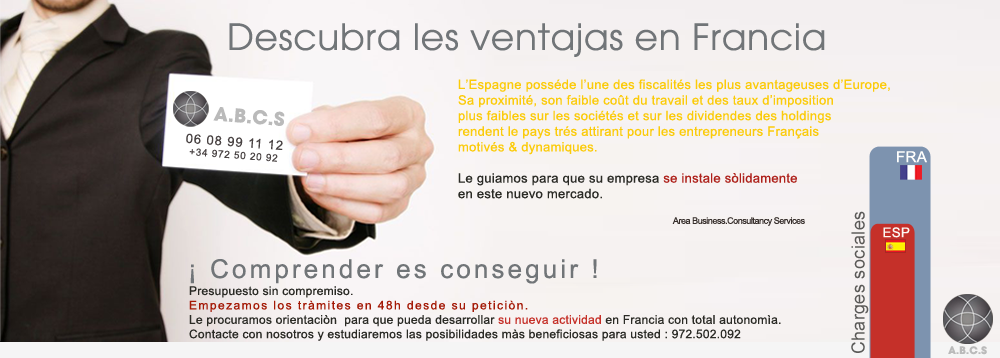
<style>
.page{position:relative;width:1000px;height:358px}
.page>*{position:absolute;margin:0}
.t1{font:36px "AvantGarde-Book";letter-spacing:0.02em;color:#717578}
.t2{font:13px "ArialMT";letter-spacing:0.02em;color:#fbcb0a}
.t3{font:13px "ArialMT";letter-spacing:0.02em;color:#2b2b26}
.t4{font:13px "ArialMT";letter-spacing:0.02em;color:#ae211b}
.t5{font:18.6px "AvantGardeLT-Bold";letter-spacing:0.01em;color:#bababa}
.t6{font:10px "ArialMT";letter-spacing:0.07em;color:#494343}
.t7{font:13px "ArialMT";letter-spacing:0.07em;color:#494343}
.t8{font:15.1px "ArialMT";letter-spacing:0.02em;color:#fefefc}
.t9{font:9px "ArialMT";letter-spacing:-0.05em;color:#362e2b}
.t10{font:10px "ArialMT";letter-spacing:0.025em;color:#362e2b}
.t11{font:18px "ArialMT";letter-spacing:0.02em;color:#5a5957}
.t12{font:13.4px "ArialMT";letter-spacing:0.02em;color:#fcf9f4}
.t13{font:26px "ArialMT";letter-spacing:0.12em;color:#717578}
.t14{font:12px "ArialMT";letter-spacing:0.02em;color:#2b2b26}
.t15{font:12px "ArialMT";letter-spacing:0.12em;color:#a41a07}
.t16{font:12px "ArialMT";letter-spacing:0.02em;color:#c53029}
.t17{font:10.2px "AvantGardeLT-Bold";letter-spacing:0.01em;color:#bababa}
</style>
<div class="page">
<p class="t1" style="left:229px;top:23px;width:596px;height:34px">Descubra les ventajas en Francia</p>
<p class="t2" style="left:458px;top:79px;width:432px;height:120px">L’Espagne posséde l’une des fiscalités les plus avantageuses d’Europe,<br>Sa proximité, son faible coût du travail et des taux d’imposition <br>plus faibles sur les sociétés et sur les dividendes des holdings  <br>rendent le pays trés attirant pour les entrepreneurs Français<br>motivés &amp; dynamiques.<br><span class="t3"><br>Le guiamos para que su empresa </span><span class="t4">se instale sòlidamente<br></span><span class="t3">en este nuevo mercado.</span></p>
<p class="t5" style="left:213px;top:107px;width:72px;height:19px;rotate:5deg">A.B.C.S</p>
<p class="t6" style="left:186px;top:133px;width:97px;height:29px;text-align:center;rotate:4deg"><span class="t7">06 08 99 11 12<br></span>+34 972 50 20 92</p>
<p class="t8" style="left:897px;top:151px;width:30px;height:12px">FRA</p>
<p class="t9" style="left:672px;top:217px;width:133px;height:9px"><span class="t10"><br></span>Area Business.Consultancy Services</p>
<p class="t11" style="left:851px;top:211px;width:18px;height:142px;rotate:-90deg">Charges sociales</p>
<p class="t12" style="left:883px;top:227px;width:27px;height:11px">ESP</p>
<p class="t13" style="left:190px;top:259px;width:407px;height:25px">¡ Comprender es conseguir !</p>
<p class="t14" style="left:189px;top:286px;width:592px;height:55px">Presupuesto sin compremiso.<br><span class="t15">Empezamos los tràmites en 48h desde su peticiòn.<br></span>Le procuramos orientaciòn  para que pueda desarrollar <span class="t16">su nueva actividad</span> en Francia con total autonomìa.<br>Contacte con nosotros y estudiaremos las posibilidades màs beneficiosas para usted : 972.502.092</p>
<p class="t17" style="left:948px;top:346px;width:39px;height:9px">A.B.C.S</p>
</div>
